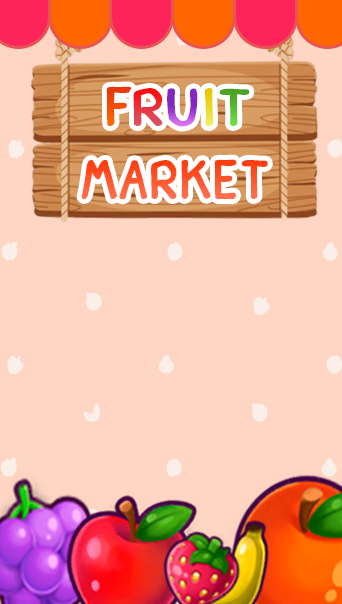
<style>
.page{position:relative;width:342px;height:604px;background:#ffd5c3}
.page>*{position:absolute;margin:0}
.t1{font:77.5px "Arabica";color:#f24a06;scale:0.96 1}
.t2{font:74.8px "Arabica"}
.t3{font:74.8px "Arabica";color:#51ab29}
.t4{font:77.7px "Arabica";scale:0.83 1}
</style>
<div class="page">
<p class="t1" style="left:106px;top:86px;width:26px;height:40px">f</p>
<p class="t2" style="left:133px;top:88px;width:30px;height:38px">r</p>
<p class="t2" style="left:167px;top:88px;width:31px;height:39px">u</p>
<p class="t2" style="left:204px;top:88px;width:9px;height:38px">i</p>
<p class="t3" style="left:219px;top:88px;width:31px;height:38px">t</p>
<p class="t4" style="left:81px;top:159px;width:187px;height:41px">market</p>
</div>
